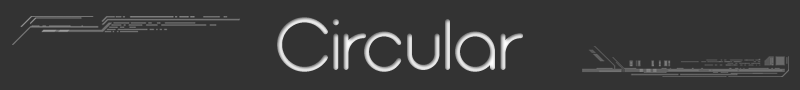
<style>
.page{position:relative;width:800px;height:90px;background:#333333}
.page>*{position:absolute;margin:0}
.t1{font:73px "Opificio-Rounded"}
</style>
<div class="page">
<p class="t1" style="left:277px;top:17px;width:246px;height:55px">Circular</p>
</div>
